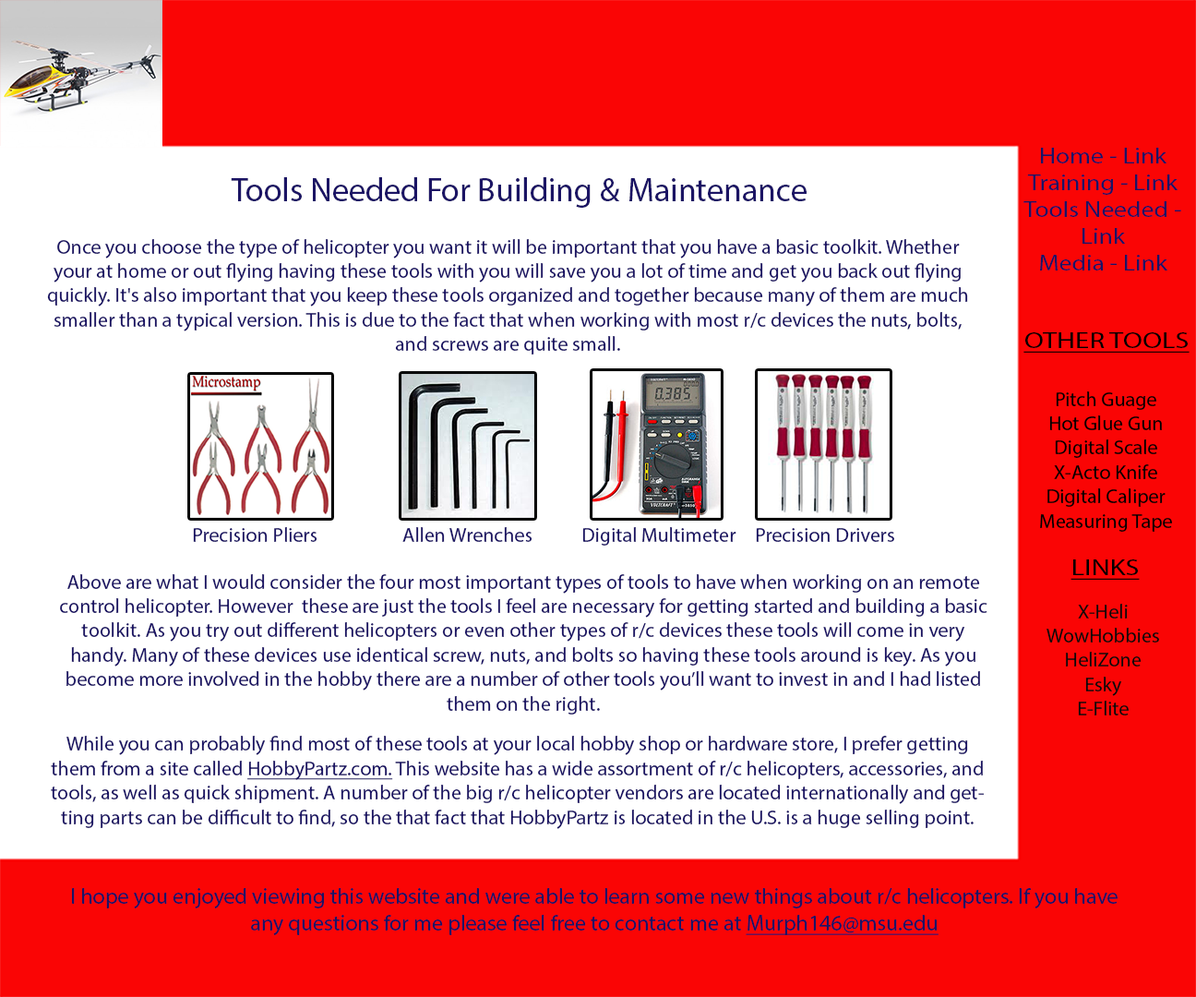
<style>
.page{position:relative;width:1196px;height:997px;background:#ffffff}
.page>*{position:absolute;margin:0}
.t1{font:22.2px "MyriadPro-Regular";color:#1b1464;scale:1.15 1}
.t2{font:33.2px "MyriadPro-Regular";color:#1b1464}
.t3{font:33.2px "MyriadPro-Regular";color:#1b1464;text-transform:uppercase}
.t4{font:20.3px "MyriadPro-Regular";color:#1b1464}
.t5{font:22.2px "MyriadPro-Regular";color:#000000;text-transform:uppercase;text-decoration:underline;scale:1.28 1}
.t6{font:20.3px "MyriadPro-Regular";color:#000000}
.t7{font:20.3px "MyriadPro-Regular";color:#1b1464;text-transform:uppercase}
.t8{font:20.3px "MyriadPro-Regular";color:#0a0a0a}
.t9{font:20.3px "MyriadPro-Regular";color:#1b1464;text-decoration:underline}
.t10{font:22.2px "MyriadPro-Regular";color:#1b1464}
.t11{font:22.2px "MyriadPro-Regular";color:#1b1464;text-decoration:underline}
</style>
<div class="page">
<p class="t1" style="left:1024px;top:148px;width:157px;height:122px;text-align:center">Home - Link<br>Training - Link<br>Tools Needed - Link<br>Media - Link</p>
<p class="t2" style="left:231px;top:177px;width:576px;height:31px"><span class="t3">T</span>ools Needed For Building &amp; Maintenance</p>
<p class="t4" style="left:47px;top:239px;width:921px;height:115px;text-align:center">Once you choose the type of helicopter you want it will be important that you have a basic toolkit. Whether your at home or out flying having these tools with you will save you a lot of time and get you back out flying quickly. It's also important that you keep these tools organized and together because many of them are much smaller than a typical version. This is due to the fact that when working with most r/c devices the nuts, bolts, and screws are quite small.</p>
<p class="t5" style="left:1024px;top:332px;width:166px;height:21px">Other Tools</p>
<p class="t6" style="left:1040px;top:391px;width:132px;height:141px;text-align:center">Pitch Guage<br>Hot Glue Gun<br>Digital Scale<br>X-Acto Knife<br>Digital Caliper<br>Measuring Tape</p>
<p class="t4" style="left:193px;top:527px;width:125px;height:15px">Precision Pliers</p>
<p class="t4" style="left:402px;top:527px;width:131px;height:15px">Allen Wrenches</p>
<p class="t4" style="left:582px;top:527px;width:155px;height:18px">Digital Multimeter</p>
<p class="t4" style="left:756px;top:528px;width:138px;height:14px">Precision Drivers</p>
<p class="t5" style="left:1071px;top:559px;width:69px;height:21px">Links</p>
<p class="t4" style="left:60px;top:574px;width:928px;height:140px;text-align:center"><span class="t7">A</span>bove are what I would consider the four most important types of tools to have when working on an remote control helicopter. However  these are just the tools I feel are necessary for getting started and building a basic toolkit. As you try out different helicopters or even other types of r/c devices these tools will come in very handy. Many of these devices use identical screw, nuts, and bolts so having these tools around is key. As you become more involved in the hobby there are a number of other tools you’ll want to invest in and I had listed them on the right.</p>
<p class="t8" style="left:1047px;top:604px;width:112px;height:111px;text-align:center">X-Heli<br>WowHobbies<br>HeliZone<br>Esky<br>E-Flite</p>
<p class="t4" style="left:51px;top:736px;width:933px;height:93px;text-align:center">While you can probably find most of these tools at your local hobby shop or hardware store, I prefer getting them from a site called <span class="t9">HobbyPartz.com.</span> This website has a wide assortment of r/c helicopters, accessories, and tools, as well as quick shipment. A number of the big r/c helicopter vendors are located internationally and getting parts can be difficult to find, so the that fact that HobbyPartz is located in the U.S. is a huge selling point.</p>
<p class="t10" style="left:72px;top:888px;width:1046px;height:47px;text-align:center">I hope you enjoyed viewing this website and were able to learn some new things about r/c helicopters. If you have any questions for me please feel free to contact me at <span class="t11">Murph146@msu.edu</span></p>
</div>
